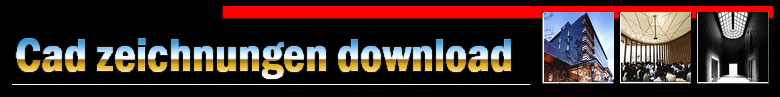
<style>
.page{position:relative;width:780px;height:97px;background:#000000}
.page>*{position:absolute;margin:0}
.t1{font:48.3px "FranklinGothic-DemiCond"}
</style>
<div class="page">
<p class="t1" style="left:16px;top:38px;width:495px;height:41px">Cad zeichnungen download</p>
</div>
